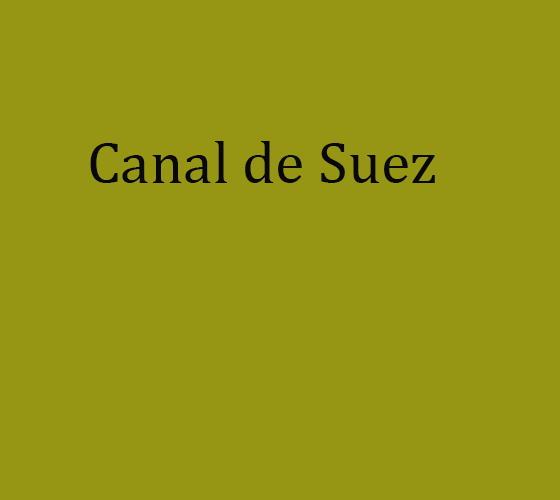
<style>
.page{position:relative;width:560px;height:500px;background:#979514}
.page>*{position:absolute;margin:0}
.t1{font:60px "CambriaMath";color:#080808}
</style>
<div class="page">
<p class="t1" style="left:90px;top:141px;width:345px;height:42px">Canal de Suez</p>
</div>
